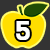
<style>
.page{position:relative;width:50px;height:50px;background:#333333}
.page>*{position:absolute;margin:0}
.t1{font:22px "BMDoHyeon";color:#ffffff;font-weight:bold}
</style>
<div class="page">
<p class="t1" style="left:16px;top:21px;width:14px;height:19px">5</p>
</div>
